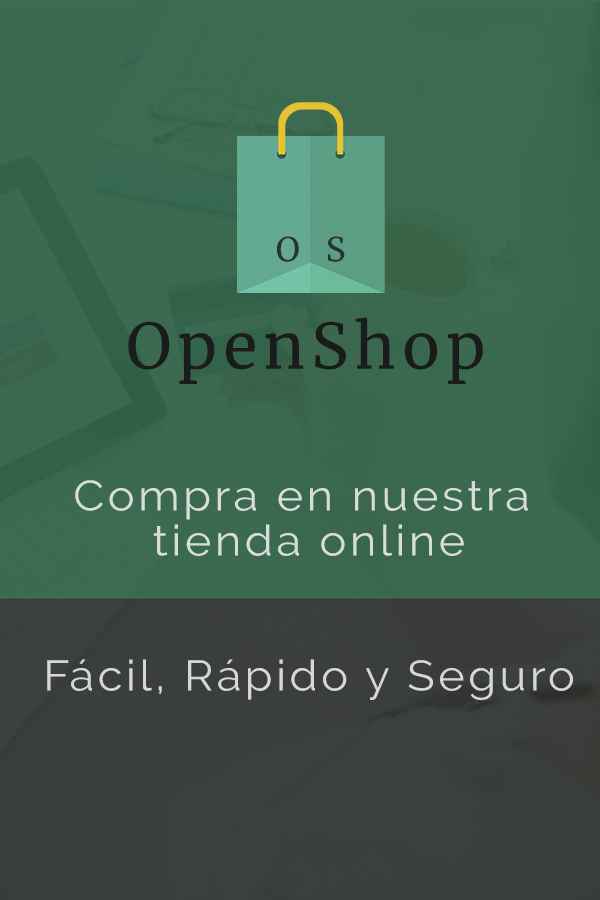
<style>
.page{position:relative;width:600px;height:900px}
.page>*{position:absolute;margin:0}
.t1{font:33.3px "Merriweather-Regular";letter-spacing:0.1em;color:#2c302e}
.t2{font:62.5px "Merriweather-Regular";letter-spacing:0.1em;color:#1a1b1b}
.t3{font:42.4px "Raleway-Regular";letter-spacing:0.08em;color:#d7ddd9;scale:1.06 1}
</style>
<div class="page">
<p class="t1" style="left:277px;top:236px;width:68px;height:26px">O  S</p>
<p class="t2" style="left:128px;top:317px;width:355px;height:67px">OpenShop</p>
<p class="t3" style="left:47px;top:480px;width:526px;height:220px;text-align:center">Compra en nuestra <br>tienda online<br><br><br>Fácil, Rápido y Seguro</p>
</div>
